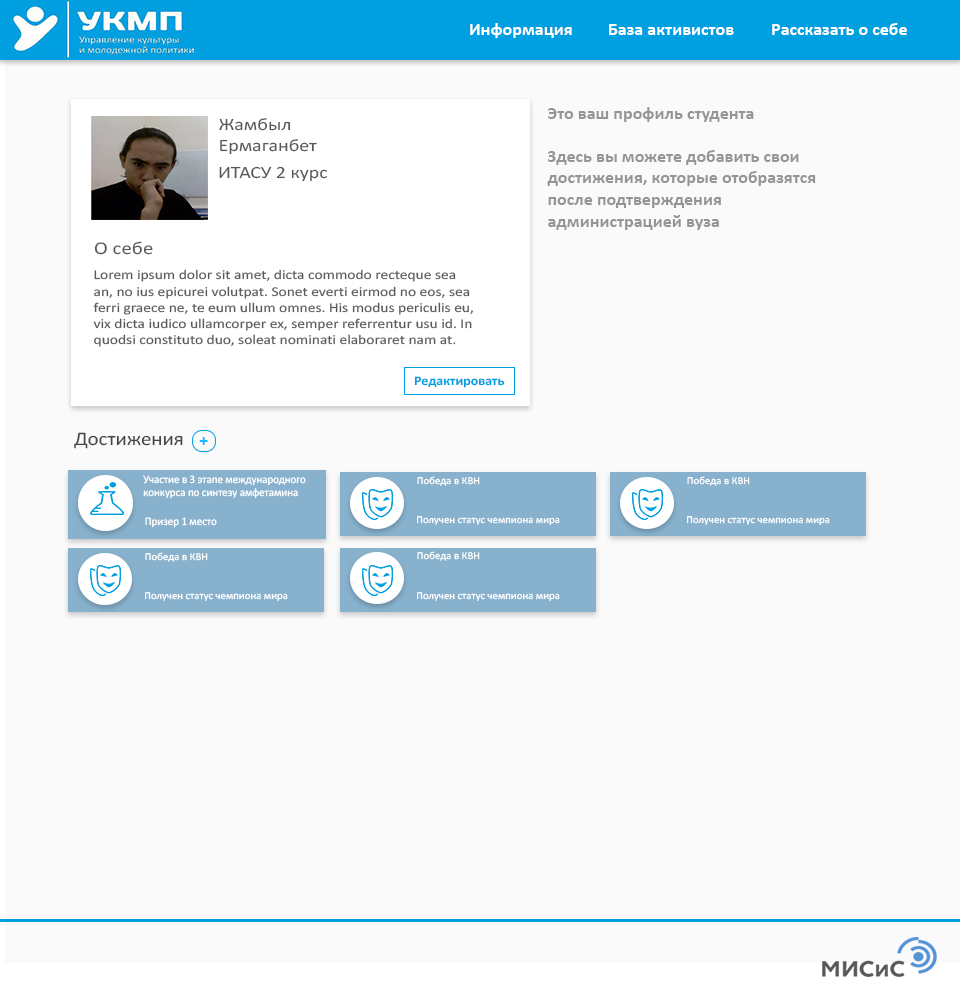
<style>
.page{position:relative;width:960px;height:1000px;background:#fafafa}
.page>*{position:absolute;margin:0}
.t1{font:18px "Calibri-Bold";color:#ffffff}
.t2{font:18px "Calibri-Bold";color:#959595}
.t3{font:17.2px "Calibri";color:#59595b;scale:1.16 1}
.t4{font:18px "Calibri";color:#59595b;scale:1.16 1}
.t5{font:13.4px "Calibri";color:#59595b;scale:1.16 1}
.t6{font:13.3px "Calibri-Bold";color:#009fdf;scale:1.05 1}
.t7{font:19.2px "Calibri";color:#484545;scale:1.09 1}
.t8{font:18px "Calibri-Bold";color:#15bbfe}
.t9{font:11.4px "Calibri";color:#ffffff;scale:0.96 1}
.t10{font:10.6px "Calibri";color:#ffffff}
</style>
<div class="page">
<p class="t1" style="left:470px;top:23px;width:102px;height:15px">Информация</p>
<p class="t1" style="left:609px;top:24px;width:125px;height:11px">База активистов</p>
<p class="t1" style="left:772px;top:23px;width:135px;height:12px">Рассказать о себе</p>
<p class="t2" style="left:547px;top:107px;width:269px;height:123px">Это ваш профиль студента<br><br>Здесь вы можете добавить свои достижения, которые отобразятся после подтверждения <br>администрацией вуза</p>
<p class="t3" style="left:219px;top:118px;width:98px;height:37px">Жамбыл <br>Ермаганбет</p>
<p class="t3" style="left:219px;top:166px;width:109px;height:16px">ИТАСУ 2 курс</p>
<p class="t4" style="left:94px;top:241px;width:59px;height:14px">О себе</p>
<p class="t5" style="left:93px;top:269px;width:380px;height:78px">Lorem ipsum dolor sit amet, dicta commodo recteque sea an, no ius epicurei volutpat. Sonet everti eirmod no eos, sea ferri graece ne, te eum ullum omnes. His modus periculis eu, vix dicta iudico ullamcorper ex, semper referrentur usu id. In quodsi constituto duo, soleat nominati elaboraret nam at.</p>
<p class="t6" style="left:414px;top:376px;width:91px;height:12px">Редактировать</p>
<p class="t7" style="left:74px;top:432px;width:109px;height:17px">Достижения</p>
<p class="t8" style="left:199px;top:437px;width:9px;height:8px">+</p>
<p class="t9" style="left:143px;top:475px;width:163px;height:24px">Участие в 3 этапе международного <br>конкурса по синтезу амфетамина</p>
<p class="t10" style="left:417px;top:476px;width:63px;height:10px">Победа в КВН</p>
<p class="t10" style="left:687px;top:476px;width:63px;height:10px">Победа в КВН</p>
<p class="t9" style="left:145px;top:517px;width:72px;height:11px">Призер 1 место</p>
<p class="t10" style="left:417px;top:516px;width:143px;height:9px">Получен статус чемпиона мира</p>
<p class="t10" style="left:687px;top:516px;width:143px;height:9px">Получен статус чемпиона мира</p>
<p class="t10" style="left:145px;top:552px;width:63px;height:10px">Победа в КВН</p>
<p class="t10" style="left:417px;top:551px;width:63px;height:10px">Победа в КВН</p>
<p class="t10" style="left:145px;top:592px;width:143px;height:9px">Получен статус чемпиона мира</p>
<p class="t10" style="left:417px;top:592px;width:143px;height:9px">Получен статус чемпиона мира</p>
</div>
